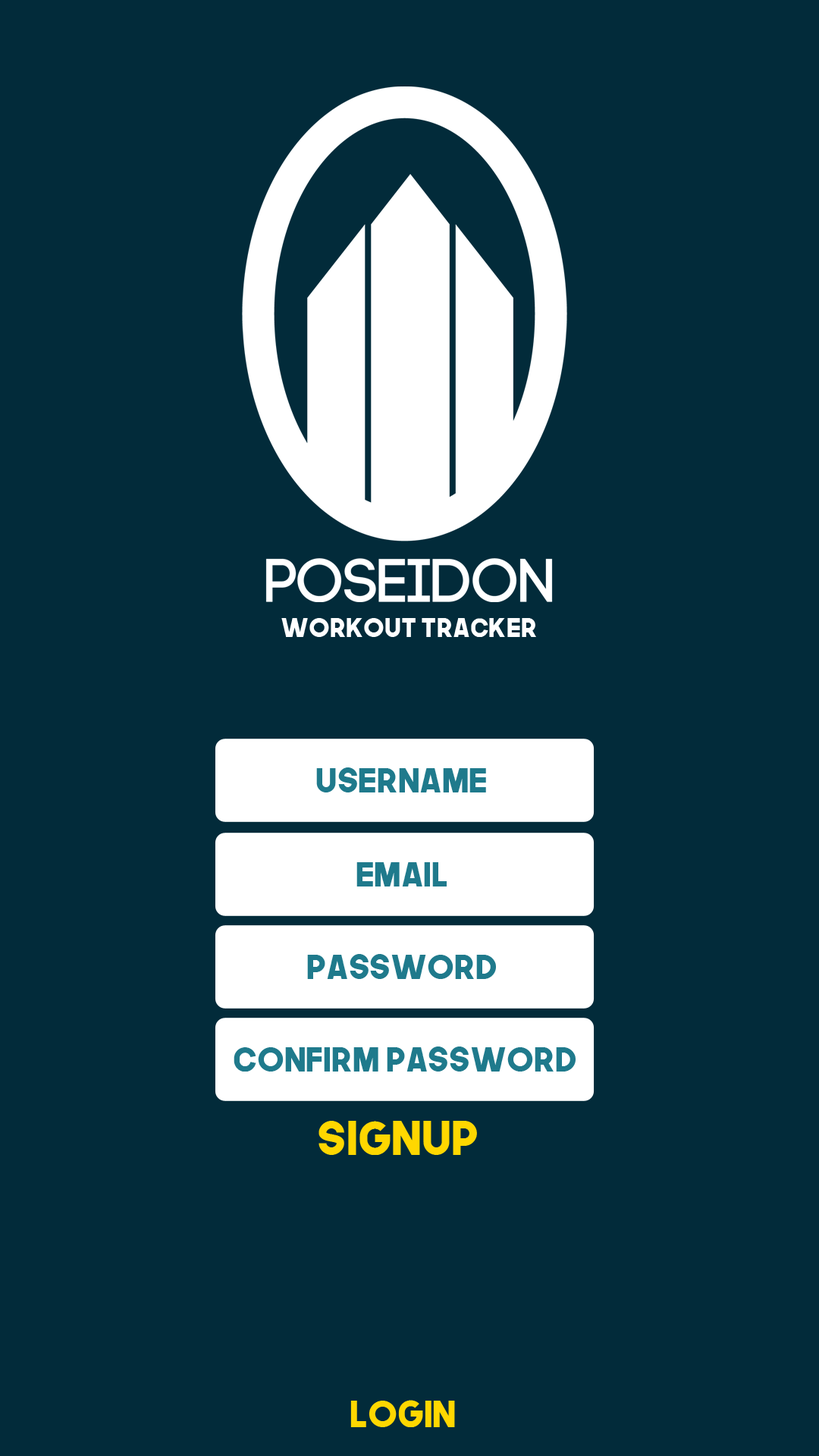
<style>
.page{position:relative;width:819px;height:1456px;background:#022b3a}
.page>*{position:absolute;margin:0}
.t1{font:25.8px "TheNextFont";color:#ffffff}
.t2{font:33.5px "TheNextFont";color:#1f7a8c}
.t3{font:46.4px "TheNextFont";color:#ffd700}
.t4{font:36.2px "TheNextFont";color:#ffd700}
</style>
<div class="page">
<p class="t1" style="left:281px;top:618px;width:255px;height:19px">Workout Tracker</p>
<p class="t2" style="left:316px;top:767px;width:170px;height:25px">Username</p>
<p class="t2" style="left:356px;top:862px;width:91px;height:24px">Email</p>
<p class="t2" style="left:307px;top:954px;width:189px;height:25px">Password</p>
<p class="t2" style="left:234px;top:1046px;width:342px;height:26px">Confirm Password</p>
<p class="t3" style="left:318px;top:1121px;width:159px;height:34px">Signup</p>
<p class="t4" style="left:350px;top:1400px;width:105px;height:27px">Login</p>
</div>
